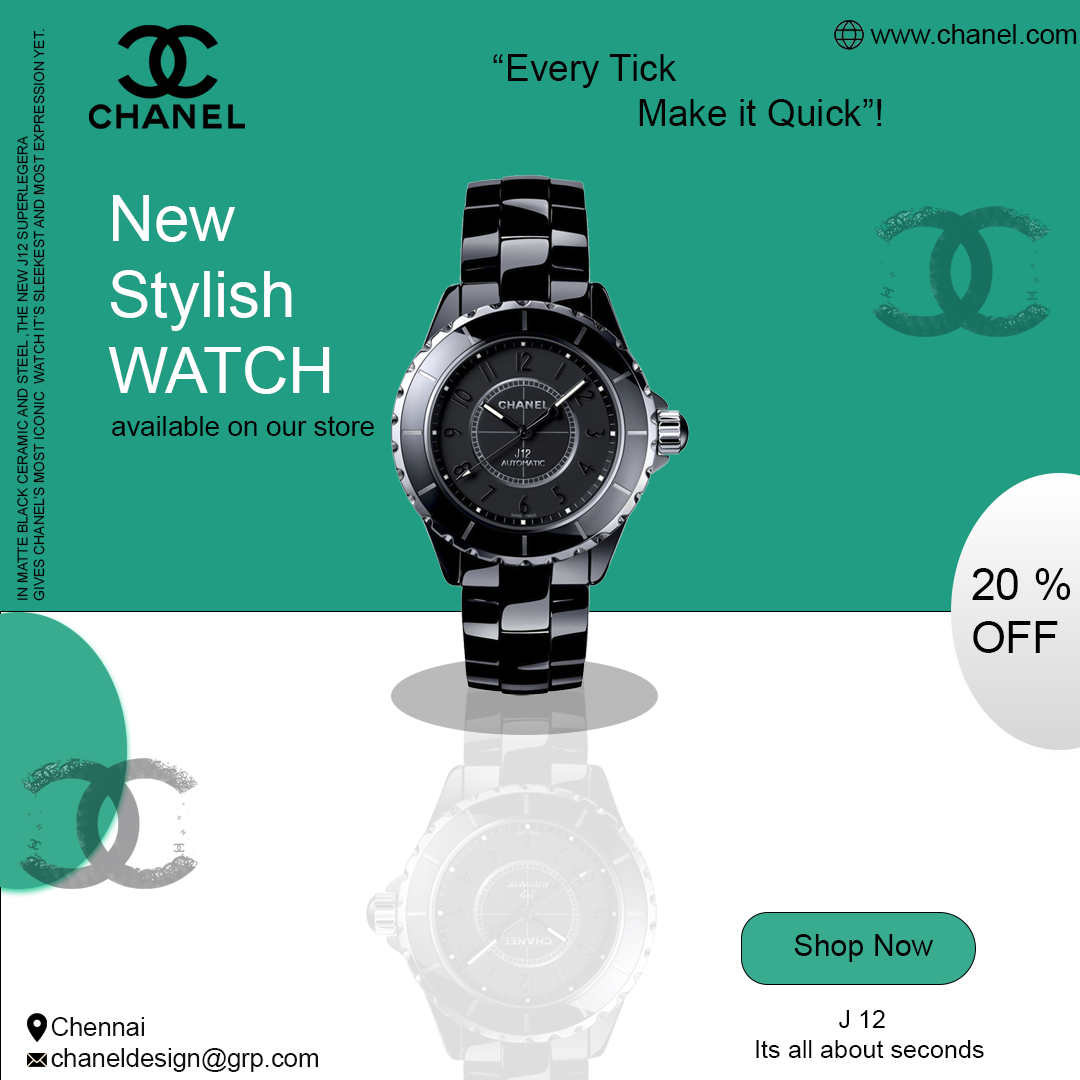
<style>
.page{position:relative;width:1080px;height:1080px;background:#219d84}
.page>*{position:absolute;margin:0}
.t1{font:13.8px "ArialMT";color:#020202}
.t2{font:27.6px "ArialMT";color:#020202}
.t3{font:37.1px "ArialMT";color:#020202}
.t4{font:63.5px "ArialMT";color:#ffffff}
.t5{font:44.5px "ArialMT";color:#020202}
.t6{font:30.4px "ArialMT";color:#020202}
.t7{font:25.3px "ArialMT";color:#040404}
.t8{font:25.3px "ArialMT";color:#030303}
.t9{font:25.5px "ArialMT";color:#120f0f}
</style>
<div class="page">
<p class="t1" style="left:17px;top:29px;width:28px;height:572px;rotate:-90deg">IN MATTE BLACK CERAMIC AND STEEL ,THE NEW J12 SUPERLEGERA<br>GIVES CHANEL’S MOST ICONIC  WATCH IT’S SLEEKEST AND MOST EXPRESSION YET.</p>
<p class="t2" style="left:870px;top:24px;width:207px;height:20px">www.chanel.com</p>
<p class="t3" style="left:493px;top:54px;width:389px;height:74px">“Every Tick<br>              Make it Quick”!</p>
<p class="t4" style="left:108px;top:195px;width:222px;height:199px">New <br>Stylish<br>WATCH</p>
<p class="t2" style="left:112px;top:416px;width:262px;height:20px">available on our store</p>
<p class="t5" style="left:972px;top:568px;width:99px;height:85px">20 %<br>OFF</p>
<p class="t6" style="left:794px;top:934px;width:140px;height:28px">Shop Now</p>
<p class="t7" style="left:756px;top:1010px;width:228px;height:48px"><span class="t8">            J 12<br></span>Its all about seconds</p>
<p class="t9" style="left:51px;top:1017px;width:267px;height:55px">Chennai<br> chaneldesign@grp.com</p>
</div>
